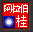
<style>
.page{position:relative;width:33px;height:32px;background:#f20000}
.page>*{position:absolute;margin:0}
.t1{font:10.4px "SimSun";letter-spacing:-0.25em;color:#ffffff}
.t2{font:11.7px "SimSun";color:#ffffff}
</style>
<div class="page">
<p class="t1" style="left:4px;top:4px;width:24px;height:9px">阿拉伯</p>
<p class="t2" style="left:16px;top:15px;width:11px;height:12px">桂</p>
</div>
